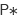
<style>
.page{position:relative;width:18px;height:18px;background:#ffffff}
.page>*{position:absolute;margin:0}
.t1{font:16.7px "AnonymousPro";color:#333333}
</style>
<div class="page">
<p class="t1" style="left:0px;top:4px;width:18px;height:11px">P*</p>
</div>
